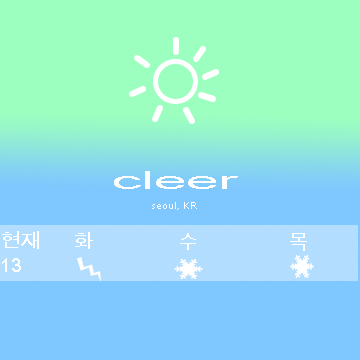
<style>
.page{position:relative;width:360px;height:360px;background:#9cffbf}
.page>*{position:absolute;margin:0}
.t1{font:25.3px "ArialUnicodeMS";color:#ffffff;scale:2.31 1}
.t2{font:10px "ArialUnicodeMS";color:#ffffff}
.t3{font:20px "ArialUnicodeMS";color:#ffffff}
</style>
<div class="page">
<p class="t1" style="left:114px;top:171px;width:124px;height:18px">cleer</p>
<p class="t2" style="left:152px;top:202px;width:45px;height:8px">seoul, KR</p>
<p class="t3" style="left:2px;top:231px;width:37px;height:41px">현재<br>13</p>
<p class="t3" style="left:75px;top:232px;width:232px;height:19px">화              수               목</p>
</div>
